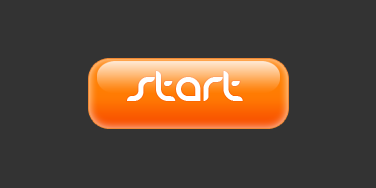
<style>
.page{position:relative;width:376px;height:188px;background:#333333}
.page>*{position:absolute;margin:0}
.t1{font:30px "Danube";color:#ffffff}
</style>
<div class="page">
<p class="t1" style="left:127px;top:71px;width:116px;height:30px">start</p>
</div>
